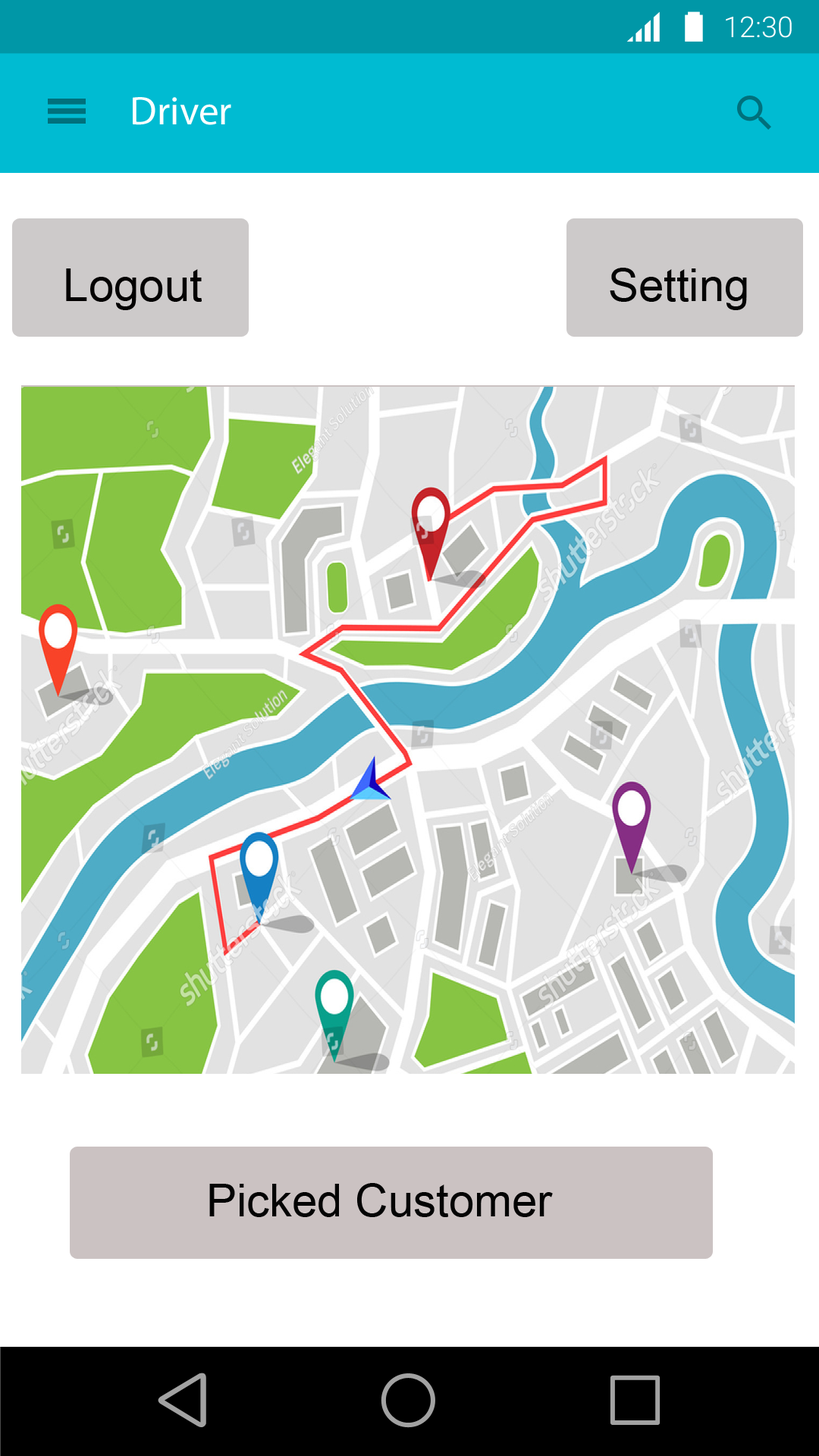
<style>
.page{position:relative;width:819px;height:1456px;background:#ffffff}
.page>*{position:absolute;margin:0}
.t1{font:28.8px "Roboto-Light";color:#ffffff}
.t2{font:40.2px "MyriadPro-Regular";color:#ffffff}
.t3{font:45.5px "ArialMT";color:#030101}
.t4{font:45.5px "ArialMT";color:#040404}
</style>
<div class="page">
<p class="t1" style="left:726px;top:16px;width:66px;height:22px">12:30</p>
<p class="t2" style="left:133px;top:97px;width:98px;height:28px">Driver</p>
<p class="t3" style="left:66px;top:268px;width:136px;height:42px">Logout</p>
<p class="t4" style="left:610px;top:268px;width:137px;height:42px">Setting</p>
<p class="t4" style="left:209px;top:1183px;width:344px;height:34px">Picked Customer</p>
</div>
